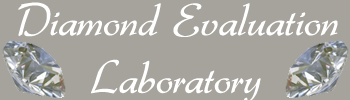
<style>
.page{position:relative;width:350px;height:100px;background:#a6a39c}
.page>*{position:absolute;margin:0}
.t1{font:48px "Gabrielle";color:#ffffff}
</style>
<div class="page">
<p class="t1" style="left:18px;top:2px;width:320px;height:100px;text-align:center">Diamond Evaluation<br>Laboratory</p>
</div>
